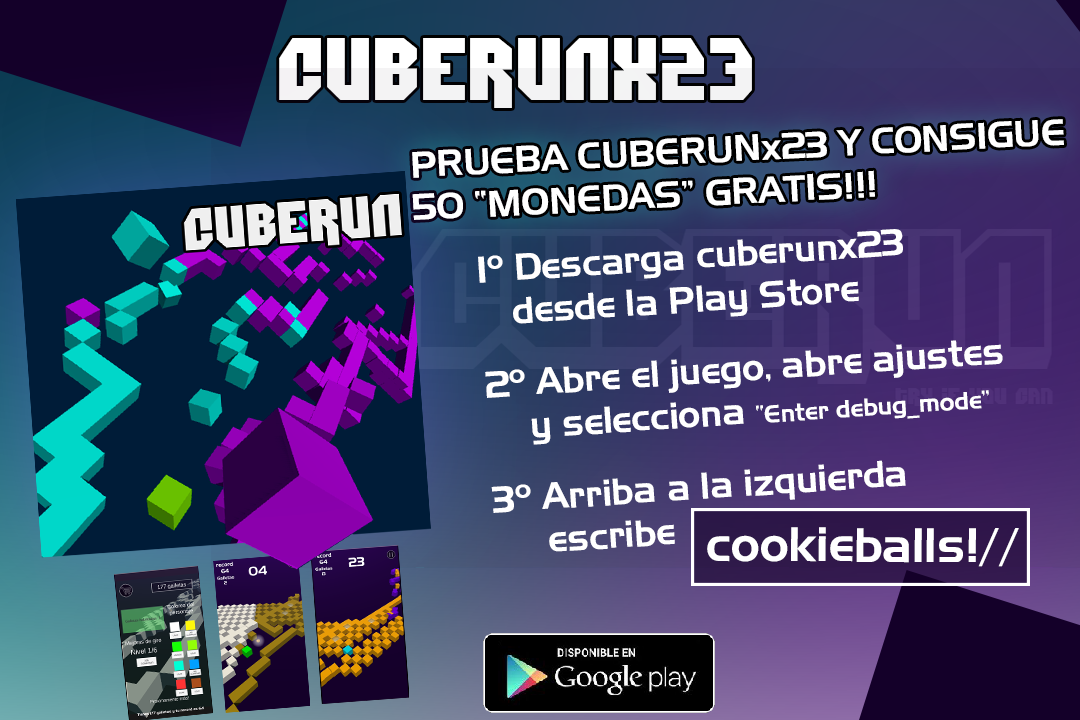
<style>
.page{position:relative;width:1080px;height:720px}
.page>*{position:absolute;margin:0}
.t1{font:88.6px "Dimitri";color:#ffffff}
.t2{font:35.7px "AeroRegularSWFTE";color:#ffffff}
.t3{font:36px "AeroRegularSWFTE";color:#ffffff}
.t4{font:24px "AeroRegularSWFTE";color:#ffffff}
.t5{font:46.9px "AeroRegularSWFTE";color:#ffffff}
</style>
<div class="page">
<p class="t1" style="left:279px;top:38px;width:473px;height:70px">CUBERUNx23</p>
<p class="t2" style="left:412px;top:119px;width:652px;height:101px;rotate:-3deg">PRUEBA CUBERUNx23 Y CONSIGUE <br>50 “MONEDAS” GRATIS!!!</p>
<p class="t3" style="left:478px;top:229px;width:525px;height:323px;rotate:-4deg">1º Descarga cuberunx23<br>   desde la Play Store<br> <br>2º Abre el juego, abre ajustes<br>    y selecciona <span class="t4">“Enter debug_mode”<br><br></span>3º Arriba a la izquierda <br>     escribe</p>
<p class="t5" style="left:707px;top:527px;width:312px;height:40px">cookieballs!//</p>
</div>
